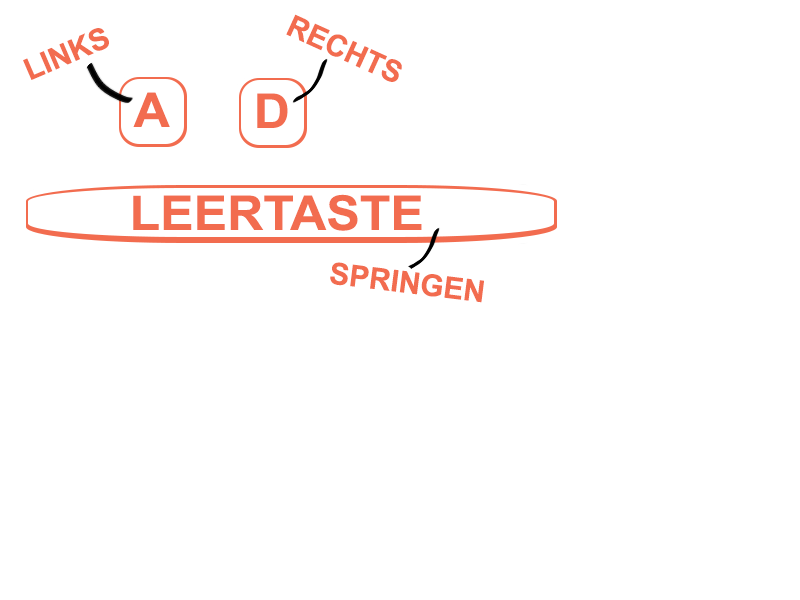
<style>
.page{position:relative;width:800px;height:600px;background:#ffffff}
.page>*{position:absolute;margin:0}
.t1{font:30px "Arial-BoldMT";color:#f26c4f}
.t2{font:48px "Arial-BoldMT";color:#f26c4f;scale:1.04 1}
</style>
<div class="page">
<p class="t1" style="left:286px;top:14px;width:116px;height:68px;rotate:24deg">RECHTS</p>
<p class="t1" style="left:23px;top:28px;width:86px;height:52px;rotate:-23deg">LINKS</p>
<p class="t2" style="left:133px;top:92px;width:37px;height:35px">A</p>
<p class="t2" style="left:257px;top:93px;width:31px;height:35px">D</p>
<p class="t2" style="left:133px;top:194px;width:289px;height:37px">LEERTASTE</p>
<p class="t1" style="left:330px;top:262px;width:154px;height:41px;rotate:7deg">SPRINGEN</p>
</div>
